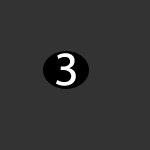
<style>
.page{position:relative;width:150px;height:150px;background:#333333}
.page>*{position:absolute;margin:0}
.t1{font:48px "MyriadPro-Regular";color:#ffffff}
</style>
<div class="page">
<p class="t1" style="left:56px;top:53px;width:20px;height:33px">3</p>
</div>
